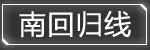
<style>
.page{position:relative;width:150px;height:50px}
.page>*{position:absolute;margin:0}
.t1{font:27px "MicrosoftYaHei";letter-spacing:0.05em;color:#ffffff}
</style>
<div class="page">
<p class="t1" style="left:19px;top:10px;width:112px;height:28px">南回归线</p>
</div>
